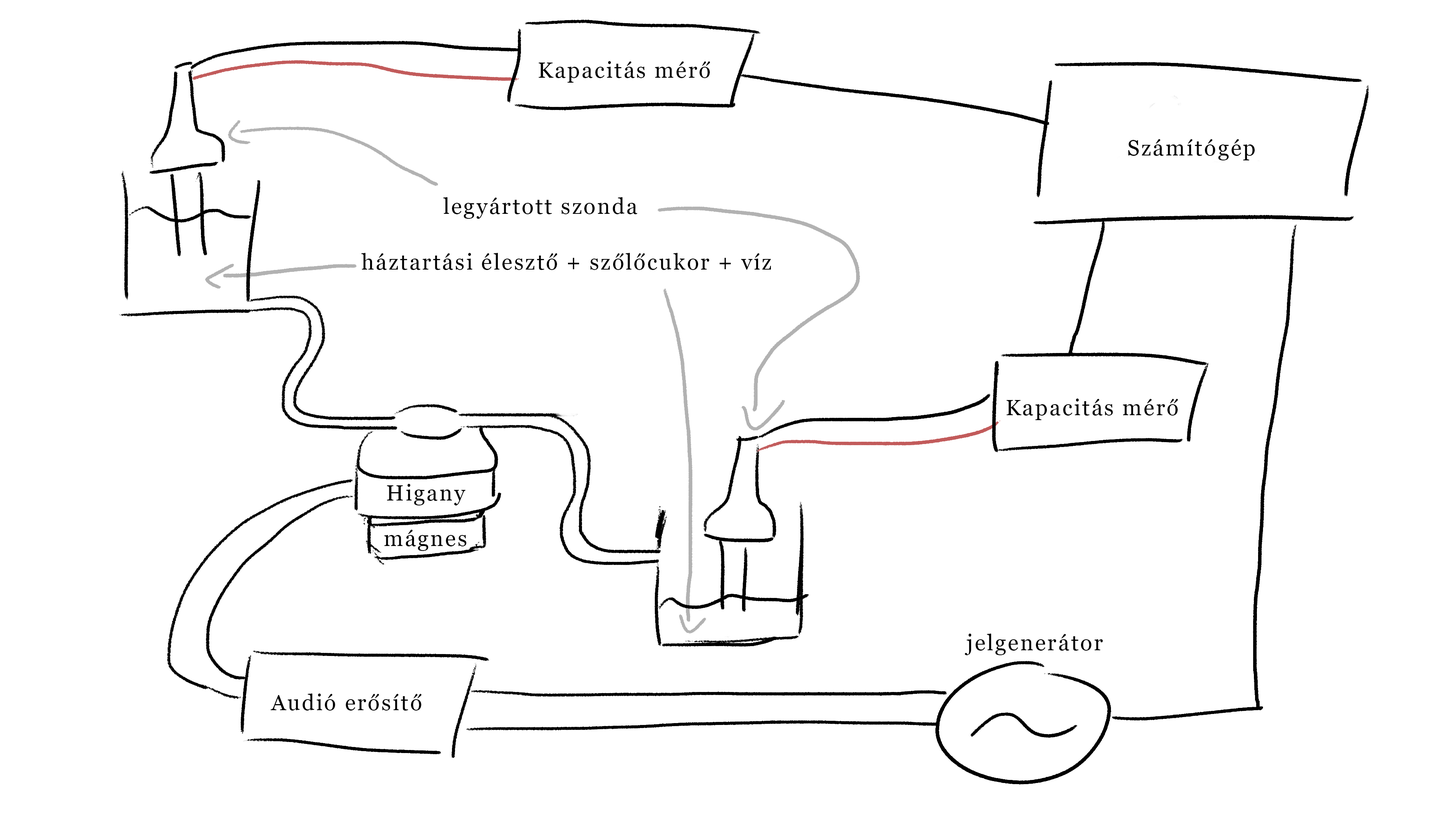
<style>
.page{position:relative;width:1456px;height:819px;background:#ffffff}
.page>*{position:absolute;margin:0}
.t1{font:22.1px "Georgia";letter-spacing:0.075em;color:#000000}
</style>
<div class="page">
<p class="t1" style="left:538px;top:61px;width:172px;height:22px">Kapacitás mérő</p>
<p class="t1" style="left:1128px;top:139px;width:127px;height:21px">Számítógép</p>
<p class="t1" style="left:443px;top:197px;width:194px;height:22px">legyártott szonda</p>
<p class="t1" style="left:361px;top:253px;width:410px;height:17px">háztartási élesztő + szőlőcukor + víz</p>
<p class="t1" style="left:1006px;top:398px;width:172px;height:22px">Kapacitás mérő</p>
<p class="t1" style="left:387px;top:484px;width:79px;height:21px">Higany</p>
<p class="t1" style="left:384px;top:530px;width:82px;height:21px">mágnes</p>
<p class="t1" style="left:965px;top:634px;width:138px;height:21px">jelgenerátor</p>
<p class="t1" style="left:270px;top:693px;width:152px;height:18px">Audió erősítő</p>
</div>
